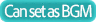
<style>
.page{position:relative;width:96px;height:22px;background:#25a4a6}
.page>*{position:absolute;margin:0}
.t1{font:18px "AdobeClean-Regular";letter-spacing:-0.08em;color:#ffffff;scale:0.9 1}
</style>
<div class="page">
<p class="t1" style="left:4px;top:4px;width:88px;height:14px">Can set as BGM</p>
</div>
